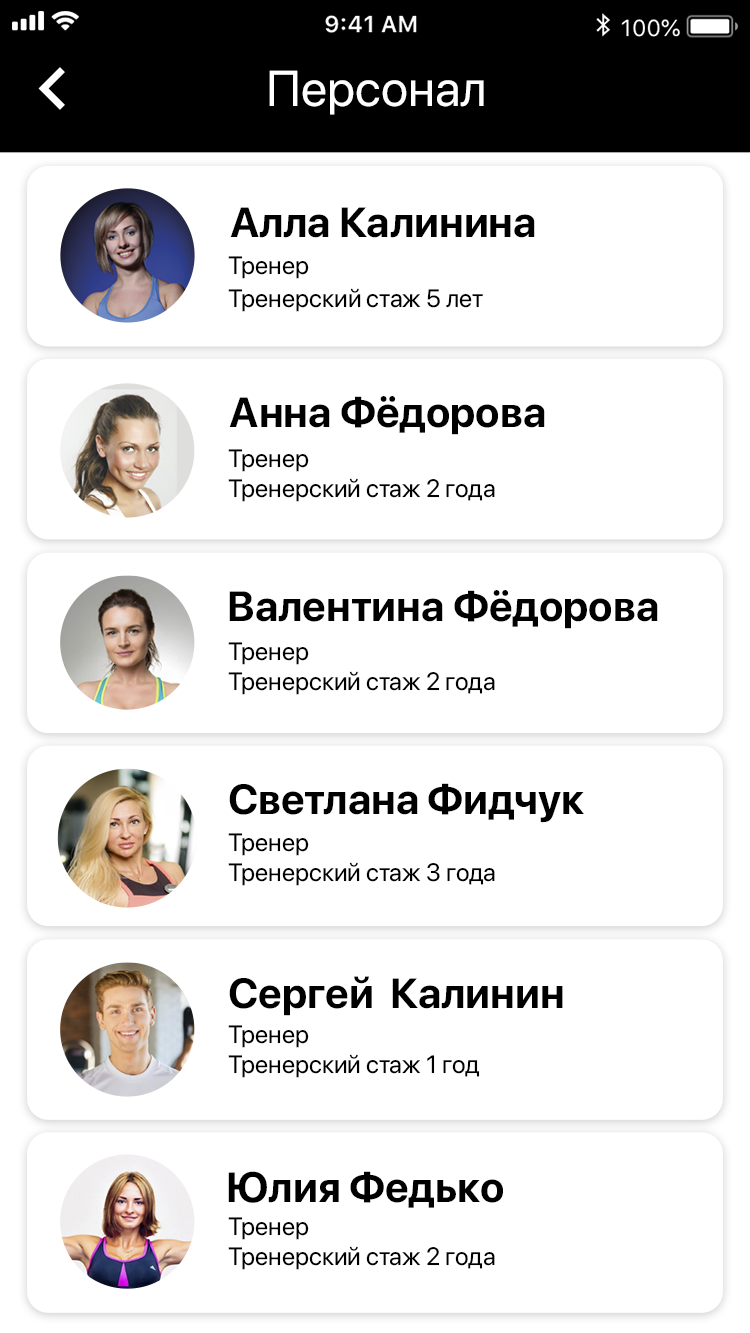
<style>
.page{position:relative;width:750px;height:1333px;background:#ffffff}
.page>*{position:absolute;margin:0}
.t1{font:50px "SFProDisplay-Regular";color:#ffffff}
.t2{font:42px "SFProDisplay-Bold";color:#000000}
.t3{font:25px/33.3px "SFProDisplay-Regular";color:#000000}
.t4{font:25px "SFProDisplay-Regular";color:#000000}
</style>
<div class="page">
<p class="t1" style="left:269px;top:70px;width:215px;height:45px">Персонал</p>
<p class="t2" style="left:230px;top:207px;width:305px;height:31px">Алла Калинина</p>
<p class="t3" style="left:228px;top:256px;width:255px;height:56px">Тренер<br>Тренерский стаж 5 лет</p>
<p class="t2" style="left:229px;top:396px;width:316px;height:39px">Анна Фёдорова</p>
<p class="t4" style="left:228px;top:449px;width:267px;height:53px">Тренер<br>Тренерский стаж 2 года</p>
<p class="t2" style="left:229px;top:590px;width:429px;height:39px">Валентина Фёдорова</p>
<p class="t4" style="left:228px;top:642px;width:267px;height:53px">Тренер<br>Тренерский стаж 2 года</p>
<p class="t2" style="left:229px;top:783px;width:355px;height:40px">Светлана Фидчук</p>
<p class="t4" style="left:228px;top:833px;width:267px;height:53px">Тренер<br>Тренерский стаж 3 года</p>
<p class="t2" style="left:229px;top:976px;width:334px;height:40px">Сергей  Калинин</p>
<p class="t4" style="left:228px;top:1025px;width:252px;height:53px">Тренер<br>Тренерский стаж 1 год</p>
<p class="t2" style="left:228px;top:1171px;width:275px;height:37px">Юлия Федько</p>
<p class="t4" style="left:228px;top:1217px;width:267px;height:53px">Тренер<br>Тренерский стаж 2 года</p>
</div>
